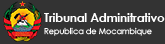
<style>
.page{position:relative;width:165px;height:44px;background:#333333}
.page>*{position:absolute;margin:0}
.t1{font:11.5px "CenturyGothic-Bold";color:#ffffff}
.t2{font:8px "CenturyGothic";color:#ffffff}
</style>
<div class="page">
<p class="t1" style="left:44px;top:13px;width:121px;height:9px">Tribunal Adminitrativo</p>
<p class="t2" style="left:44px;top:27px;width:108px;height:9px">Republica de Mocambique</p>
</div>
